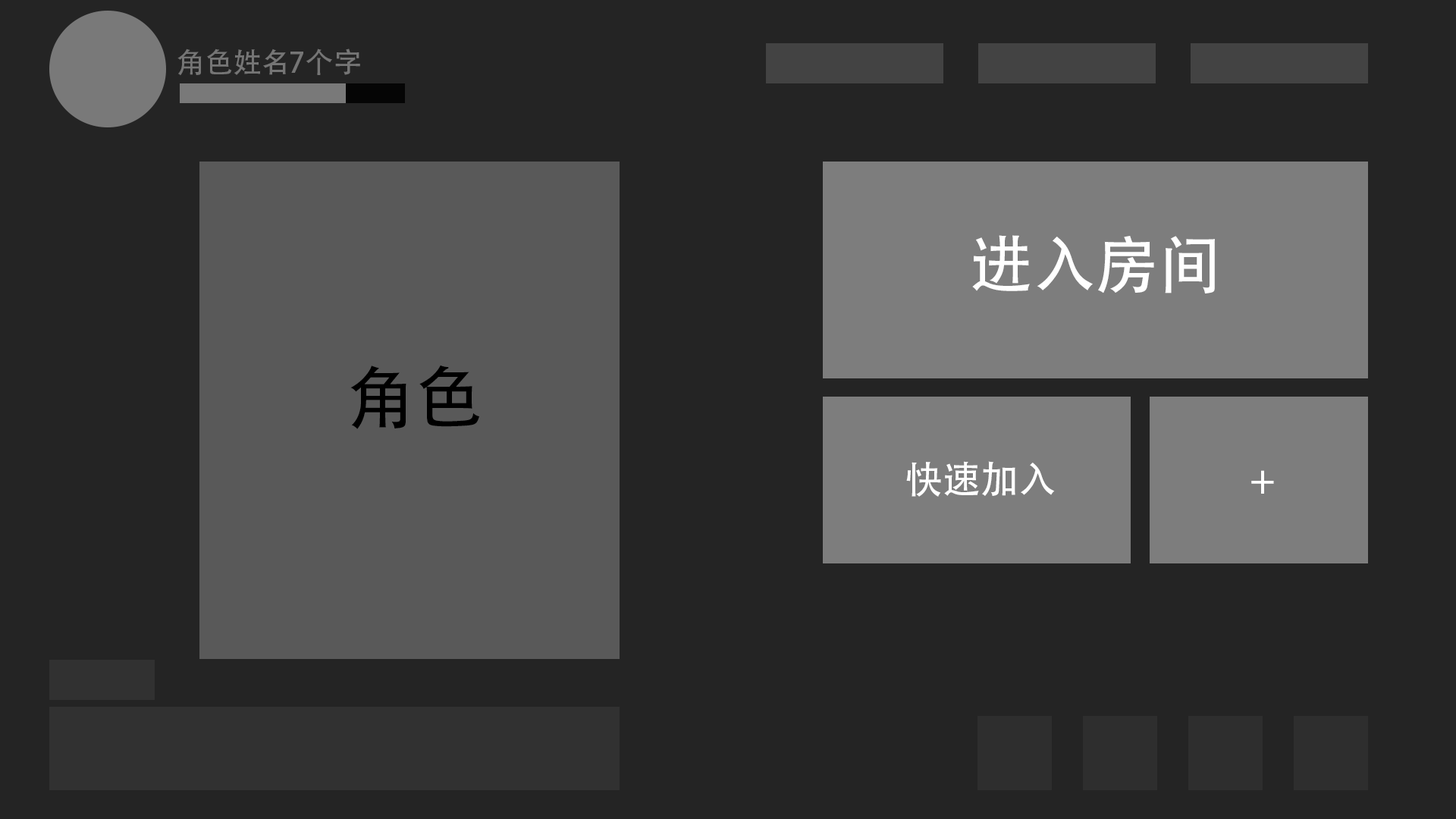
<style>
.page{position:relative;width:1456px;height:819px;background:#242424}
.page>*{position:absolute;margin:0}
.t1{font:28.3px "AdobeHeitiStd-Regular";color:#757575}
.t2{font:63px "AdobeHeitiStd-Regular";color:#ffffff}
.t3{font:68.2px "AdobeHeitiStd-Regular";color:#000000}
.t4{font:37.9px "AdobeHeitiStd-Regular";color:#ffffff}
</style>
<div class="page">
<p class="t1" style="left:177px;top:49px;width:183px;height:27px">角色姓名7个字</p>
<p class="t2" style="left:972px;top:235px;width:243px;height:58px">进入房间</p>
<p class="t3" style="left:350px;top:365px;width:129px;height:64px">角色</p>
<p class="t4" style="left:906px;top:461px;width:149px;height:36px">快速加入</p>
<p class="t4" style="left:1251px;top:470px;width:23px;height:24px">+</p>
</div>
